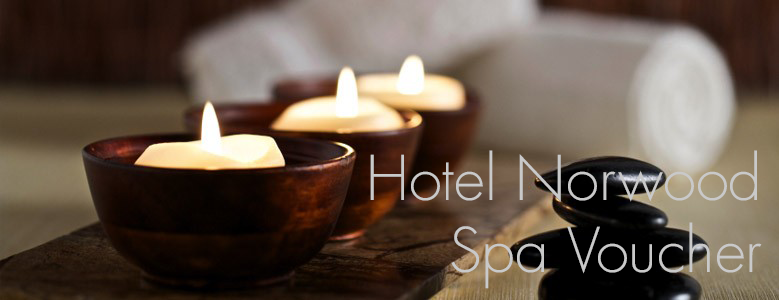
<style>
.page{position:relative;width:779px;height:300px}
.page>*{position:absolute;margin:0}
.t1{font:60px "Futura-Light";color:#c9c9c9}
</style>
<div class="page">
<p class="t1" style="left:370px;top:150px;width:392px;height:139px;text-align:right">Hotel Norwood<br>Spa Voucher</p>
</div>
